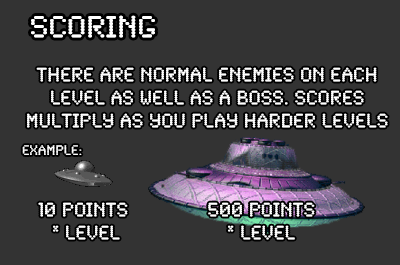
<style>
.page{position:relative;width:400px;height:265px;background:#333333}
.page>*{position:absolute;margin:0}
.t1{font:32px "SynchroLET";color:#ffffff}
.t2{font:20px/4.6px "SynchroLET";color:#ffffff}
.t3{font:14px/4.6px "SynchroLET";color:#ffffff}
</style>
<div class="page">
<p class="t1" style="left:31px;top:15px;width:124px;height:23px">SCORING</p>
<p class="t2" style="left:22px;top:67px;width:366px;height:88px;text-align:center">There are normal enemies on each<br><br><br><br><br>level as well as a boss. Scores<br><br><br><br><br>MULTIPLY as you play harder levels<br><br><br><br><br><br><span class="t3">EXAMPLE:</span></p>
<p class="t2" style="left:38px;top:202px;width:90px;height:38px;text-align:center">10 POINTS<br><br><br><br><br> * LEVEL</p>
<p class="t2" style="left:208px;top:202px;width:107px;height:38px;text-align:center">500 points<br><br><br><br><br>* LEVEL</p>
</div>
